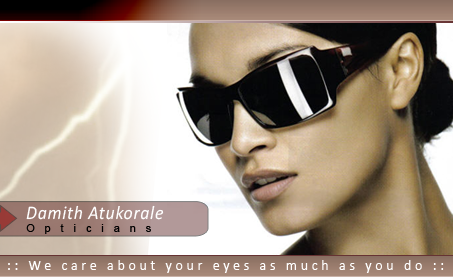
<style>
.page{position:relative;width:453px;height:277px}
.page>*{position:absolute;margin:0}
.t1{font:19.3px "Calibri-Italic";letter-spacing:0.04em;color:#ffffff;scale:0.92 1}
.t2{font:11px "ArialMT";letter-spacing:0.9em;color:#000000}
.t3{font:14px "Calibri";letter-spacing:0.26em;color:#ffffff}
</style>
<div class="page">
<p class="t1" style="left:26px;top:205px;width:138px;height:15px">Damith Atukorale</p>
<p class="t2" style="left:26px;top:224px;width:125px;height:10px">Opticians</p>
<p class="t3" style="left:8px;top:260px;width:436px;height:13px">:: We care about your eyes as much as you do ::</p>
</div>
